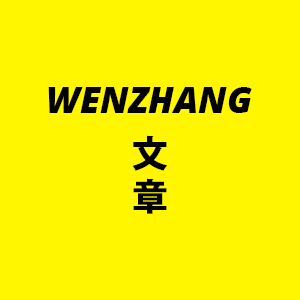
<style>
.page{position:relative;width:300px;height:300px;background:#fff600}
.page>*{position:absolute;margin:0}
.t1{font:36px "OpenSans-ExtraboldItalic";color:#000000}
.t2{font:36px "KozGoPr6N-Heavy";color:#000000}
</style>
<div class="page">
<p class="t1" style="left:48px;top:87px;width:204px;height:26px">WENZHANG</p>
<p class="t2" style="left:132px;top:135px;width:36px;height:79px;text-align:center">文<br>章</p>
</div>
